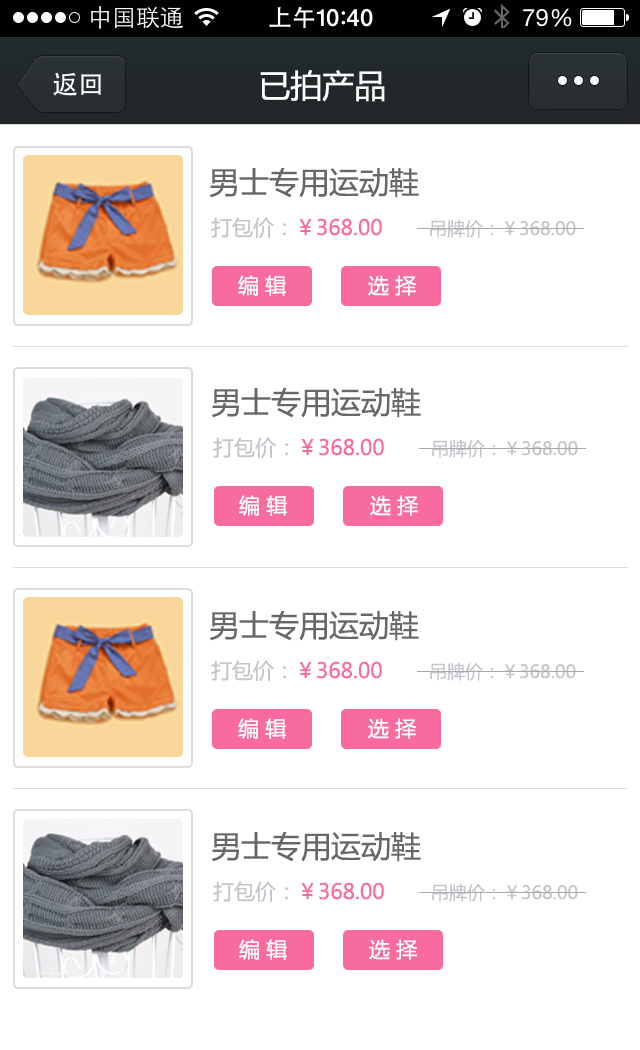
<style>
.page{position:relative;width:640px;height:1050px;background:#ffffff}
.page>*{position:absolute;margin:0}
.t1{font:32px "MicrosoftYaHei";color:#ffffff}
.t2{font:30px "MicrosoftYaHei";color:#676767}
.t3{font:21px "MicrosoftYaHei";color:#f86b9f}
.t4{font:21px "MicrosoftYaHei";color:#c3c6cb}
.t5{font:18px "MicrosoftYaHei";color:#c3c6cb}
.t6{font:21px "MicrosoftYaHei";color:#ffffff}
</style>
<div class="page">
<p class="t1" style="left:260px;top:70px;width:125px;height:32px">已拍产品</p>
<p class="t2" style="left:209px;top:168px;width:210px;height:30px">男士专用运动鞋</p>
<p class="t3" style="left:211px;top:217px;width:171px;height:21px"><span class="t4">打包价：</span>￥368.00</p>
<p class="t5" style="left:430px;top:219px;width:146px;height:19px">吊牌价：￥368.00</p>
<p class="t6" style="left:238px;top:275px;width:48px;height:21px">编 辑</p>
<p class="t6" style="left:368px;top:275px;width:48px;height:21px">选 择</p>
<p class="t2" style="left:211px;top:388px;width:210px;height:30px">男士专用运动鞋</p>
<p class="t3" style="left:213px;top:437px;width:171px;height:21px"><span class="t4">打包价：</span>￥368.00</p>
<p class="t5" style="left:432px;top:439px;width:146px;height:19px">吊牌价：￥368.00</p>
<p class="t6" style="left:239px;top:495px;width:48px;height:21px">编 辑</p>
<p class="t6" style="left:370px;top:495px;width:48px;height:21px">选 择</p>
<p class="t2" style="left:209px;top:611px;width:210px;height:30px">男士专用运动鞋</p>
<p class="t3" style="left:211px;top:660px;width:171px;height:21px"><span class="t4">打包价：</span>￥368.00</p>
<p class="t5" style="left:430px;top:662px;width:146px;height:19px">吊牌价：￥368.00</p>
<p class="t6" style="left:238px;top:718px;width:48px;height:21px">编 辑</p>
<p class="t6" style="left:368px;top:718px;width:48px;height:21px">选 择</p>
<p class="t2" style="left:211px;top:832px;width:210px;height:30px">男士专用运动鞋</p>
<p class="t3" style="left:213px;top:881px;width:171px;height:21px"><span class="t4">打包价：</span>￥368.00</p>
<p class="t5" style="left:432px;top:883px;width:146px;height:19px">吊牌价：￥368.00</p>
<p class="t6" style="left:239px;top:939px;width:48px;height:21px">编 辑</p>
<p class="t6" style="left:369px;top:939px;width:48px;height:21px">选 择</p>
</div>
